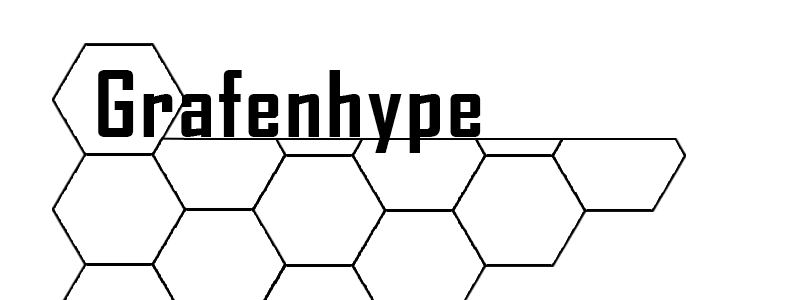
<style>
.page{position:relative;width:800px;height:300px;background:#ffffff}
.page>*{position:absolute;margin:0}
.t1{font:87.9px "AgencyFB-Bold";letter-spacing:0.04em;color:#000000;scale:1.04 1}
</style>
<div class="page">
<p class="t1" style="left:98px;top:70px;width:383px;height:83px">Grafenhype</p>
</div>
